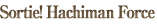
<style>
.page{position:relative;width:157px;height:26px;background:#ffffff}
.page>*{position:absolute;margin:0}
.t1{font:17px "RyuminPro-ExBold";letter-spacing:-0.085em;color:#6a553d;font-weight:bold;scale:0.9 1}
</style>
<div class="page">
<p class="t1" style="left:0px;top:5px;width:155px;height:14px">Sortie! Hachiman Force</p>
</div>
